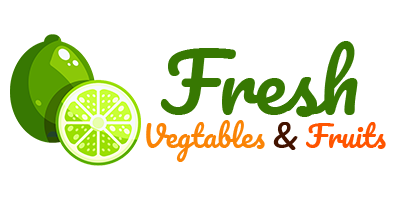
<style>
.page{position:relative;width:400px;height:200px;background:#ffffff}
.page>*{position:absolute;margin:0}
.t1{font:80px "Pacifico-Regular";color:#377802}
.t2{font:30px "Pacifico-Regular";color:#fa8406}
.t3{font:30px "Pacifico-Regular";color:#431300}
.t4{font:30px "Pacifico-Regular";color:#ff5400}
</style>
<div class="page">
<p class="t1" style="left:160px;top:41px;width:198px;height:76px">Fresh</p>
<p class="t2" style="left:146px;top:120px;width:240px;height:42px">Vegtables <span class="t3">&amp; </span><span class="t4">Fruits</span></p>
</div>
